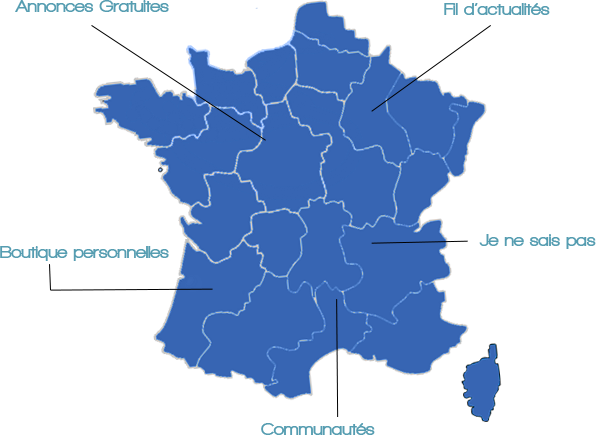
<style>
.page{position:relative;width:596px;height:435px;background:#ffffff}
.page>*{position:absolute;margin:0}
.t1{font:18px "WalkwayBlack";color:#569db1}
</style>
<div class="page">
<p class="t1" style="left:15px;top:0px;width:154px;height:12px">Annonces Gratuites</p>
<p class="t1" style="left:444px;top:3px;width:106px;height:12px">Fil d’actualités</p>
<p class="t1" style="left:0px;top:246px;width:169px;height:15px">Boutique personnelles</p>
<p class="t1" style="left:479px;top:234px;width:117px;height:15px">Je ne sais pas</p>
<p class="t1" style="left:261px;top:423px;width:114px;height:12px">Communautés</p>
</div>
